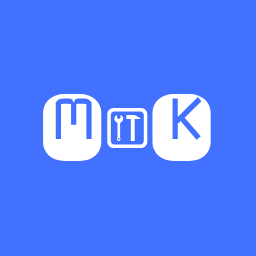
<style>
.page{position:relative;width:256px;height:256px;background:#4271ff}
.page>*{position:absolute;margin:0}
.t1{font:100px "Monofett";color:#ffffff}
.t2{font:50px "Notice2Std";color:#ffffff}
</style>
<div class="page">
<p class="t1" style="left:43px;top:94px;width:59px;height:67px">M</p>
<p class="t1" style="left:152px;top:94px;width:59px;height:67px">K</p>
<p class="t2" style="left:107px;top:108px;width:41px;height:40px">o</p>
</div>
